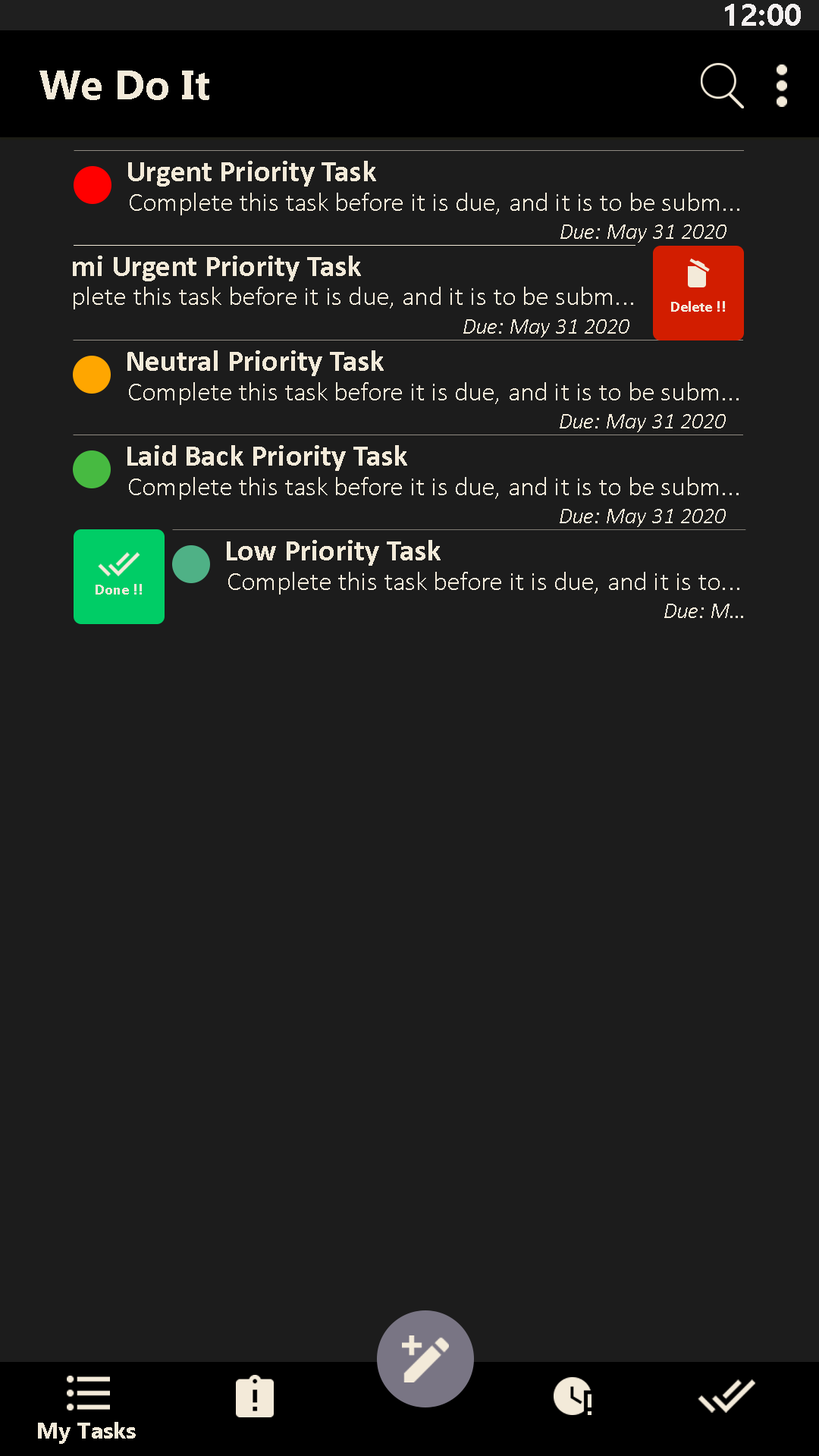
<style>
.page{position:relative;width:819px;height:1456px;background:#1c1c1c}
.page>*{position:absolute;margin:0}
.t1{font:30.8px "Ebrima-Bold";letter-spacing:0.005em;color:#f4f0f0}
.t2{font:40.9px "Ebrima-Bold";letter-spacing:0.005em;color:#f3ead9}
.t3{font:30.3px "Calibri-Bold";letter-spacing:0.005em;color:#f3ead9}
.t4{font:26.5px "Calibri-Light";letter-spacing:0.005em;color:#f3ead9}
.t5{font:22.7px "Calibri-LightItalic";letter-spacing:0.005em;color:#f3ead9}
.t6{font:15.2px "Calibri-Bold";letter-spacing:0.005em;color:#f3ead9}
.t7{font:22.7px "Ebrima-Bold";letter-spacing:0.005em;color:#f3ead9}
</style>
<div class="page">
<p class="t1" style="left:725px;top:4px;width:76px;height:22px">12:00</p>
<p class="t2" style="left:39px;top:71px;width:170px;height:29px">We Do It</p>
<p class="t3" style="left:128px;top:161px;width:248px;height:26px">Urgent Priority Task</p>
<p class="t4" style="left:130px;top:193px;width:609px;height:22px">Complete this task before it is due, and it is to be subm...</p>
<p class="t5" style="left:560px;top:224px;width:166px;height:19px">Due: May 31 2020</p>
<p class="t3" style="left:73px;top:256px;width:288px;height:25px">mi Urgent Priority Task</p>
<p class="t4" style="left:74px;top:287px;width:559px;height:22px">plete this task before it is due, and it is to be subm...</p>
<p class="t6" style="left:671px;top:301px;width:54px;height:11px">Delete !!</p>
<p class="t5" style="left:463px;top:319px;width:166px;height:18px">Due: May 31 2020</p>
<p class="t3" style="left:127px;top:350px;width:257px;height:26px">Neutral Priority Task</p>
<p class="t4" style="left:129px;top:382px;width:610px;height:23px">Complete this task before it is due, and it is to be subm...</p>
<p class="t5" style="left:560px;top:414px;width:166px;height:18px">Due: May 31 2020</p>
<p class="t3" style="left:127px;top:445px;width:280px;height:26px">Laid Back Priority Task</p>
<p class="t4" style="left:129px;top:477px;width:610px;height:23px">Complete this task before it is due, and it is to be subm...</p>
<p class="t5" style="left:560px;top:509px;width:166px;height:18px">Due: May 31 2020</p>
<p class="t3" style="left:227px;top:540px;width:214px;height:26px">Low Priority Task</p>
<p class="t4" style="left:228px;top:572px;width:511px;height:23px">Complete this task before it is due, and it is to...</p>
<p class="t6" style="left:96px;top:584px;width:46px;height:11px">Done !!</p>
<p class="t5" style="left:664px;top:604px;width:79px;height:14px">Due: M...</p>
<p class="t7" style="left:38px;top:1422px;width:98px;height:22px">My Tasks</p>
</div>
